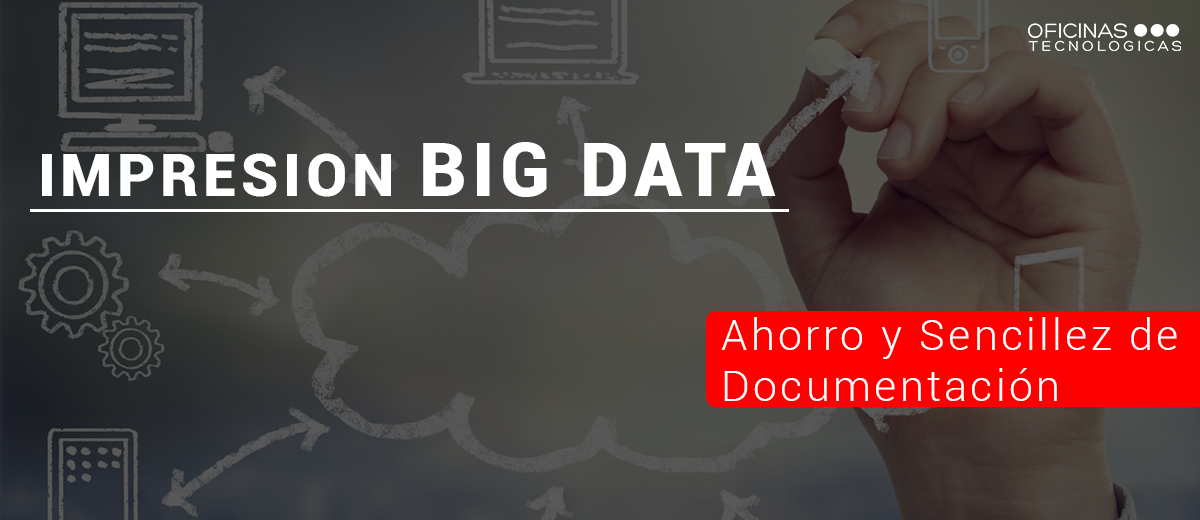
<style>
.page{position:relative;width:1200px;height:520px}
.page>*{position:absolute;margin:0}
.t1{font:60.3px "Roboto-Black";letter-spacing:0.075em;color:#ffffff}
.t2{font:75px "Roboto-Black";letter-spacing:0.075em;color:#ffffff}
.t3{font:43.2px "Roboto-Light";letter-spacing:0.075em;color:#ffffff}
</style>
<div class="page">
<p class="t1" style="left:42px;top:142px;width:734px;height:55px">IMPRESION <span class="t2">BIG DATA</span></p>
<p class="t3" style="left:721px;top:317px;width:456px;height:84px">Ahorro y Sencillez de <br>Documentación</p>
</div>
